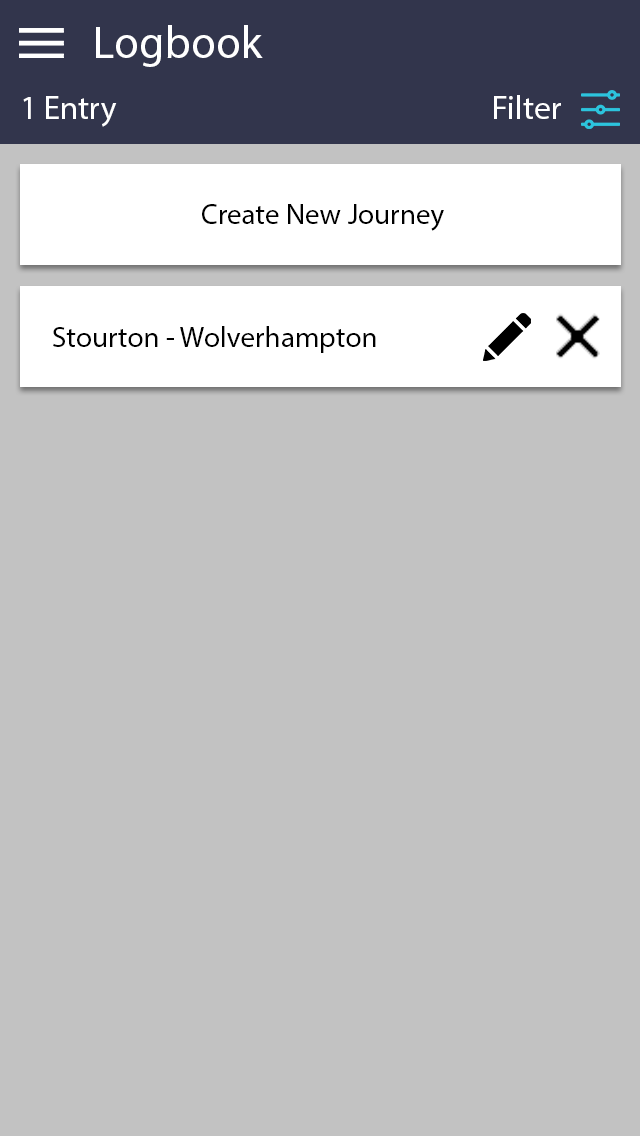
<style>
.page{position:relative;width:640px;height:1136px;background:#c2c2c2}
.page>*{position:absolute;margin:0}
.t1{font:45.8px "MyriadPro-Regular";color:#ffffff}
.t2{font:33.3px "MyriadPro-Regular";color:#ffffff}
.t3{font:29.2px "MyriadPro-Regular";color:#000000}
</style>
<div class="page">
<p class="t1" style="left:96px;top:25px;width:167px;height:42px">Logbook</p>
<p class="t2" style="left:23px;top:96px;width:94px;height:31px">1 Entry</p>
<p class="t2" style="left:494px;top:95px;width:67px;height:24px">Filter</p>
<p class="t3" style="left:202px;top:204px;width:242px;height:27px">Create New Journey</p>
<p class="t3" style="left:53px;top:326px;width:323px;height:27px">Stourton - Wolverhampton</p>
</div>
